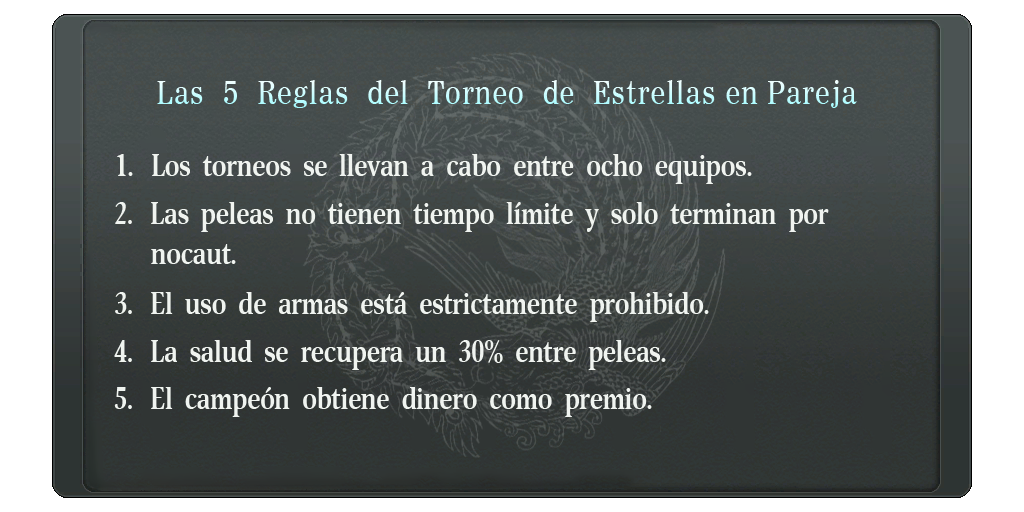
<style>
.page{position:relative;width:1024px;height:512px}
.page>*{position:absolute;margin:0}
.t1{font:29px "ExcelsiorInsertioLTW04-Rg";letter-spacing:0.055em;scale:0.88 1}
.t2{font:29.7px "OrbiW01-NarrowBold";letter-spacing:-0.015em;color:#f0f4f0}
.t3{font:29.7px/40.1px "OrbiW01-NarrowBold";letter-spacing:-0.015em;color:#f0f4f0}
</style>
<div class="page">
<p class="t1" style="left:157px;top:80px;width:700px;height:28px">Las  5  Reglas  del  Torneo  de  Estrellas en Pareja</p>
<p class="t2" style="left:117px;top:154px;width:635px;height:30px">1.   Los  torneos  se  llevan  a  cabo  entre  ocho  equipos.</p>
<p class="t3" style="left:115px;top:202px;width:714px;height:62px">2.   Las  peleas  no  tienen  tiempo  límite  y  solo  terminan  por<br>      nocaut.</p>
<p class="t2" style="left:115px;top:292px;width:594px;height:30px">3.   El  uso  de  armas  está  estrictamente  prohibido.</p>
<p class="t2" style="left:114px;top:340px;width:552px;height:30px">4.   La  salud  se  recupera  un  30%  entre  peleas.</p>
<p class="t2" style="left:114px;top:387px;width:538px;height:30px">5.   El  campeón  obtiene  dinero  como  premio.</p>
</div>
